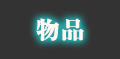
<style>
.page{position:relative;width:120px;height:59px;background:#333333}
.page>*{position:absolute;margin:0}
.t1{font:24px "RyuminPr6N-ExBold";color:#fff6f2;font-weight:bold}
</style>
<div class="page">
<p class="t1" style="left:36px;top:18px;width:48px;height:23px">物品</p>
</div>
